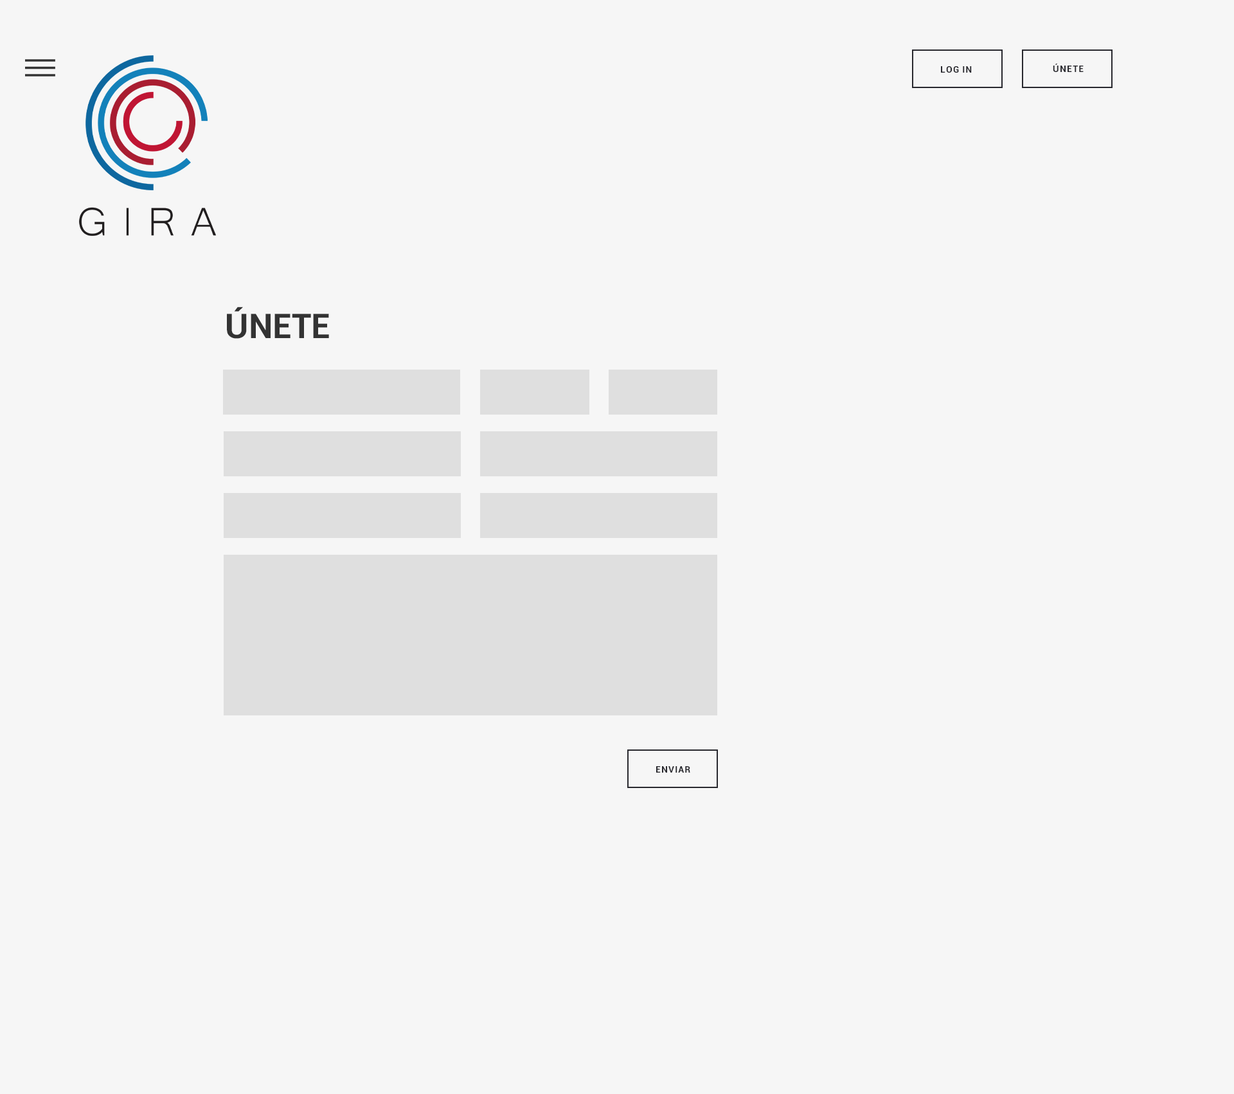
<style>
.page{position:relative;width:1234px;height:1094px;background:#f6f6f6}
.page>*{position:absolute;margin:0}
.t1{font:9px "Roboto-Bold";letter-spacing:0.075em;color:#28282e;text-transform:uppercase}
.t2{font:34.1px "Roboto-Bold";letter-spacing:0.01em;color:#333333}
</style>
<div class="page">
<p class="t1" style="left:1053px;top:64px;width:31px;height:8px">ÚNETE</p>
<p class="t1" style="left:941px;top:66px;width:31px;height:7px">LOG IN</p>
<p class="t2" style="left:227px;top:307px;width:102px;height:32px">ÚNETE</p>
<p class="t1" style="left:656px;top:766px;width:34px;height:7px">ENVIAR</p>
</div>
